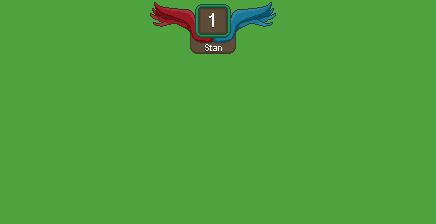
<style>
.page{position:relative;width:436px;height:224px;background:#4fa33f}
.page>*{position:absolute;margin:0}
.t1{font:18.7px "ArialMT";color:#ffffff}
.t2{font:9.3px "ArialMT";color:#ffffff}
</style>
<div class="page">
<p class="t1" style="left:209px;top:13px;width:5px;height:14px">1</p>
<p class="t2" style="left:205px;top:44px;width:17px;height:7px">Stan</p>
</div>
